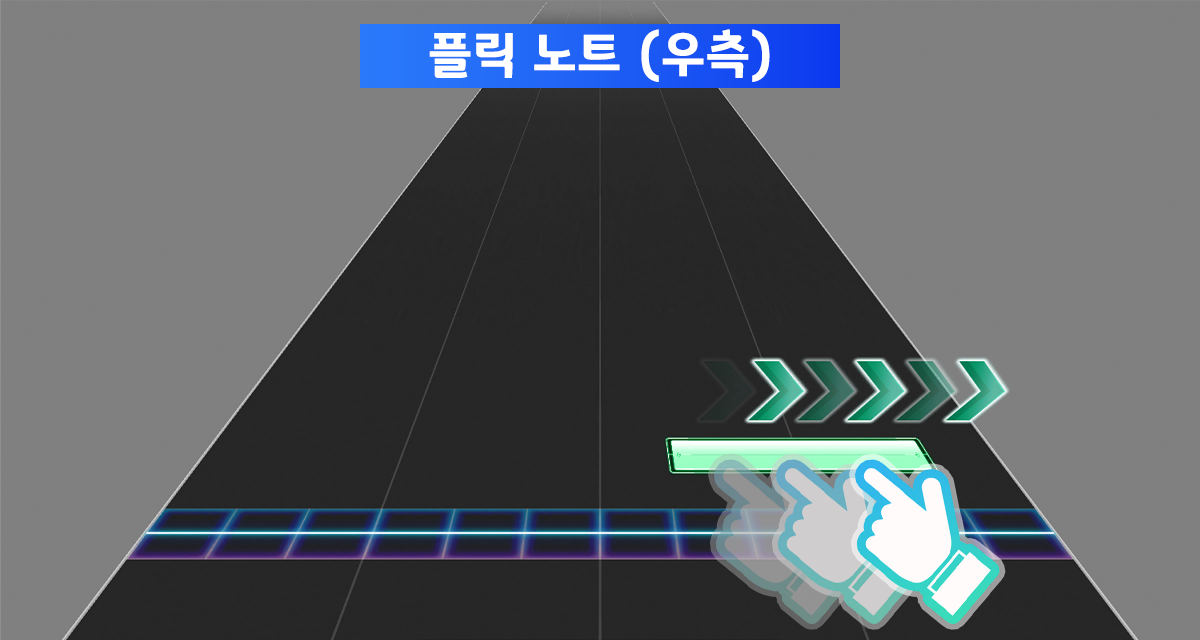
<style>
.page{position:relative;width:1200px;height:640px;background:#808080}
.page>*{position:absolute;margin:0}
.t1{font:50.7px "GyeonggiTitleB";letter-spacing:0.03em;color:#ffffff}
</style>
<div class="page">
<p class="t1" style="left:429px;top:29px;width:341px;height:53px">플릭 노트 (우측)</p>
</div>
